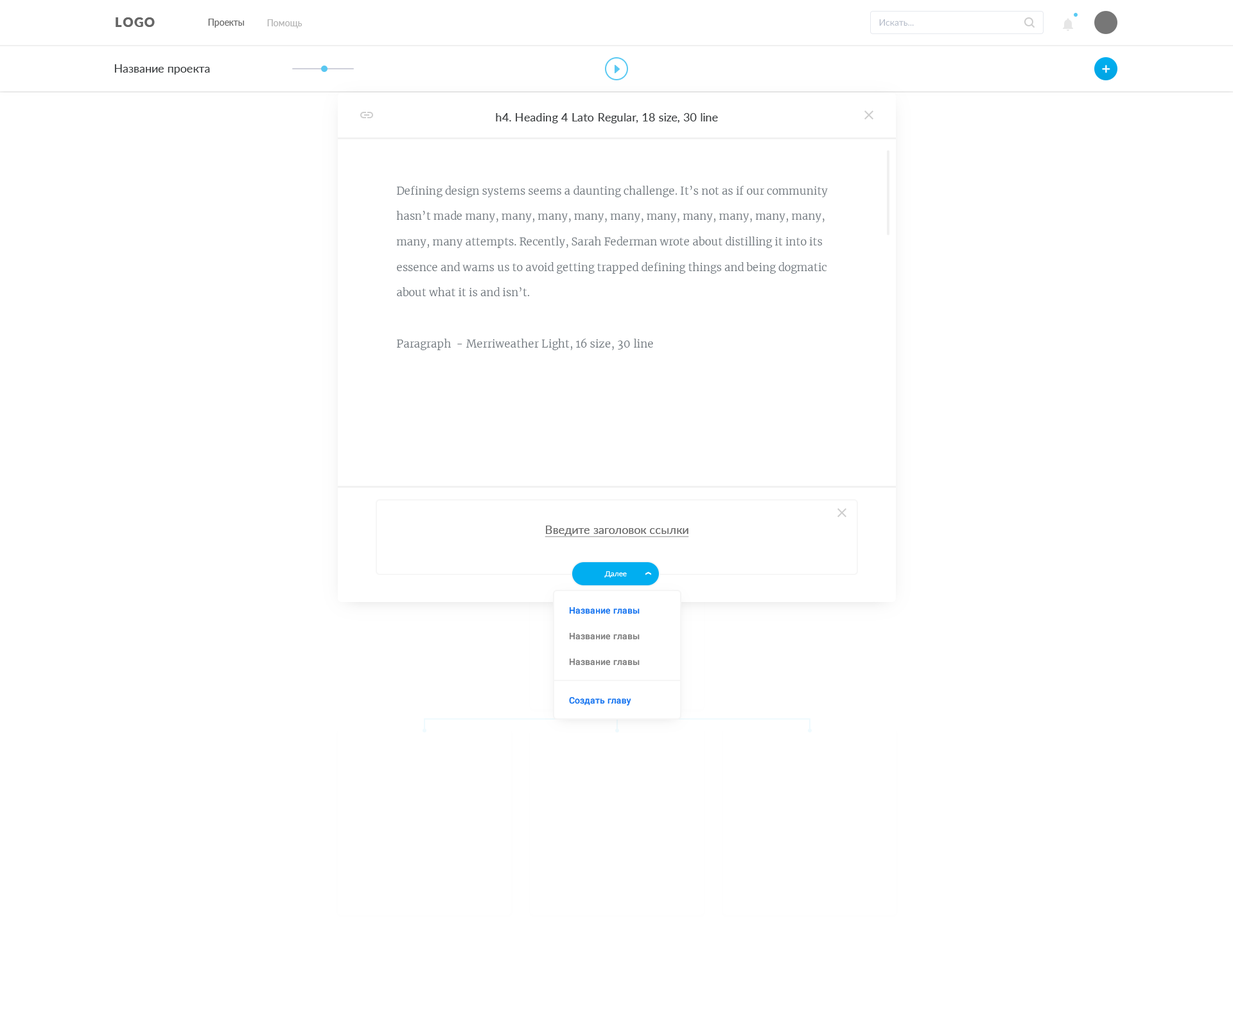
<style>
.page{position:relative;width:1233px;height:1028px;background:#ffffff}
.page>*{position:absolute;margin:0}
.t1{font:12.8px "Lato-Black";letter-spacing:0.08em;color:#666666;text-transform:uppercase}
.t2{font:9px "Lato-Regular";color:#666666}
.t3{font:9px "Lato-Regular";color:#b3b3b3}
.t4{font:9px "Lato-Regular";color:#9fa9ba}
.t5{font:11.6px "Lato-Regular";color:#393c3e}
.t6{font:10.3px/25.5px "Merriweather-Light";color:#71787e;scale:1.03 1}
.t7{font:11.6px "Lato-Regular";color:#666666;text-decoration:underline}
.t8{font:7.7px "Lato-Regular";color:#ffffff}
.t9{font:9px/25.7px "Roboto-Medium";color:#808080}
.t10{font:9px/25.7px "Roboto-Medium";color:#1875f0}
.t11{font:9px "Roboto-Medium";color:#1875f0}
</style>
<div class="page">
<p class="t1" style="left:116px;top:17px;width:39px;height:10px">logo</p>
<p class="t2" style="left:208px;top:19px;width:36px;height:9px">Проекты</p>
<p class="t3" style="left:267px;top:19px;width:35px;height:9px">Помощь</p>
<p class="t4" style="left:879px;top:19px;width:35px;height:7px;opacity:0.8">Искать...</p>
<p class="t5" style="left:114px;top:64px;width:96px;height:10px">Название проекта</p>
<p class="t5" style="left:496px;top:113px;width:222px;height:10px">h4. Heading 4 Lato Regular, 18 size, 30 line</p>
<p class="t6" style="left:396px;top:186px;width:432px;height:164px">Defining design systems seems a daunting challenge. It’s not as if our community hasn’t made many, many, many, many, many, many, many, many, many, many, many, many attempts. Recently, Sarah Federman wrote about distilling it into its essence and warns us to avoid getting trapped defining things and being dogmatic about what it is and isn’t.<br><br>Paragraph  - Merriweather Light, 16 size, 30 line</p>
<p class="t7" style="left:545px;top:525px;width:144px;height:12px">Введите заголовок ссылки</p>
<p class="t8" style="left:604px;top:571px;width:23px;height:6px">Далее</p>
<p class="t9" style="left:570px;top:607px;width:70px;height:58px"><span class="t10">Название главы<br></span>Название главы<br>Название главы</p>
<p class="t11" style="left:569px;top:697px;width:62px;height:8px">Создать главу</p>
</div>
